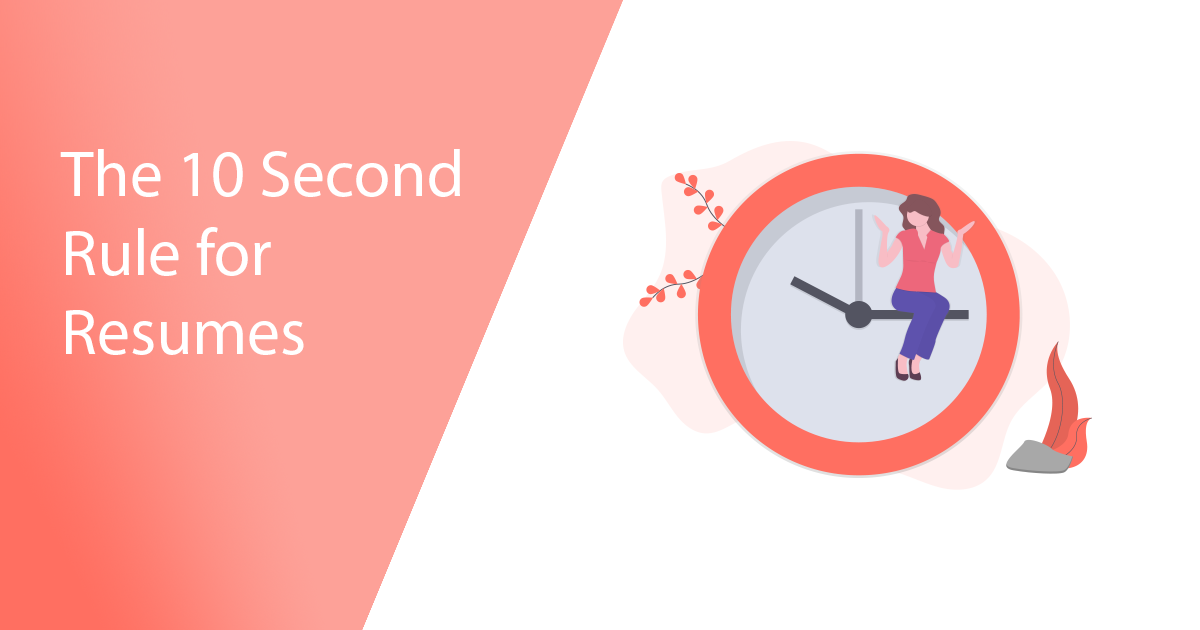
<style>
.page{position:relative;width:1200px;height:630px;background:#ffffff}
.page>*{position:absolute;margin:0}
.t1{font:66px "MyriadPro-Regular";color:#ffffff}
</style>
<div class="page">
<p class="t1" style="left:60px;top:149px;width:400px;height:206px">The 10 Second<br>Rule for <br>Resumes</p>
</div>
